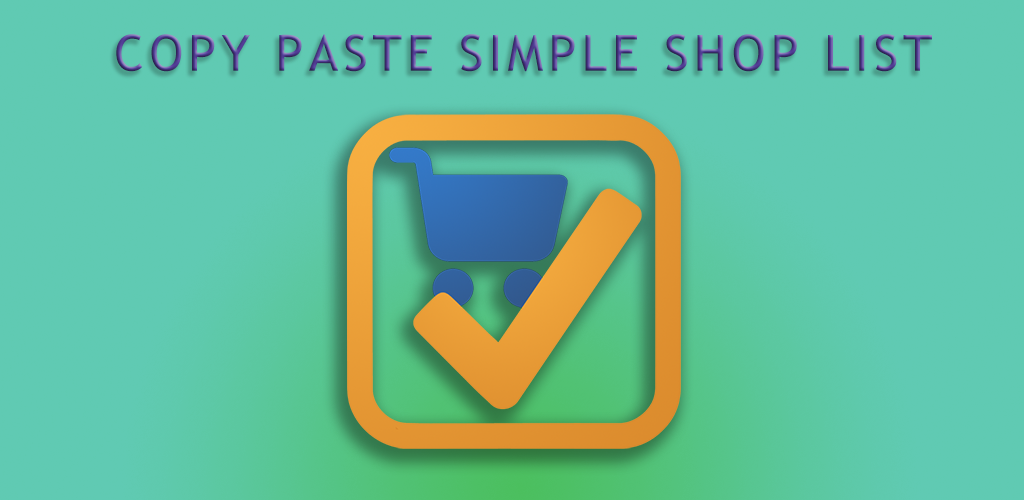
<style>
.page{position:relative;width:1024px;height:500px;background:#60cab3}
.page>*{position:absolute;margin:0}
.t1{font:50px "TrebuchetMS";letter-spacing:0.105em;text-transform:uppercase}
</style>
<div class="page">
<p class="t1" style="left:116px;top:34px;width:816px;height:38px">COPY PASTE SIMPLE SHOP LIST</p>
</div>
